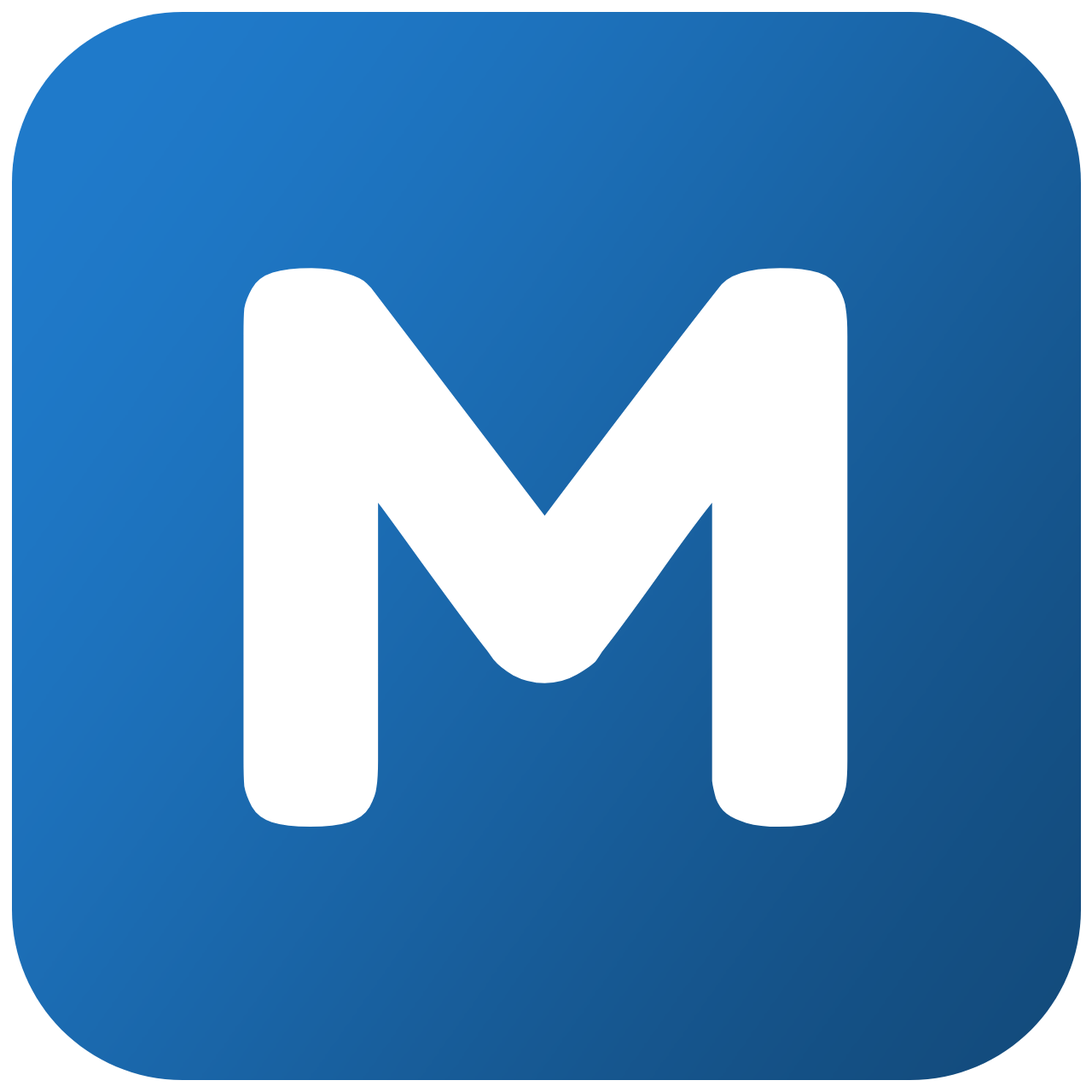
<style>
.page{position:relative;width:1092px;height:1092px;background:#ffffff}
.page>*{position:absolute;margin:0}
.t1{font:764.4px "FredokaOne-Regular";letter-spacing:-0.412em;color:#ffffff}
</style>
<div class="page">
<p class="t1" style="left:243px;top:268px;width:605px;height:560px">M</p>
</div>
